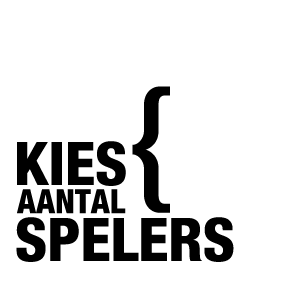
<style>
.page{position:relative;width:300px;height:296px;background:#ffffff}
.page>*{position:absolute;margin:0}
.t1{font:140.3px "HelveticaNeue-MediumCond";color:#000000;text-transform:uppercase}
.t2{font:60px "HelveticaNeue-HeavyCond";color:#000000;text-transform:uppercase}
.t3{font:33.2px "HelveticaNeue-HeavyCond";color:#000000;text-transform:uppercase}
</style>
<div class="page">
<p class="t1" style="left:132px;top:86px;width:38px;height:127px">{</p>
<p class="t2" style="left:17px;top:141px;width:109px;height:45px">Kies</p>
<p class="t3" style="left:17px;top:189px;width:109px;height:25px">AANTAl</p>
<p class="t2" style="left:16px;top:217px;width:218px;height:45px">SPELERS</p>
</div>
